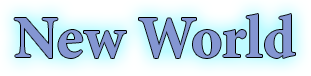
<style>
.page{position:relative;width:311px;height:76px}
.page>*{position:absolute;margin:0}
.t1{font:60px "MinionPro-Bold";color:#8496d2}
</style>
<div class="page">
<p class="t1" style="left:14px;top:14px;width:281px;height:44px">New World</p>
</div>
